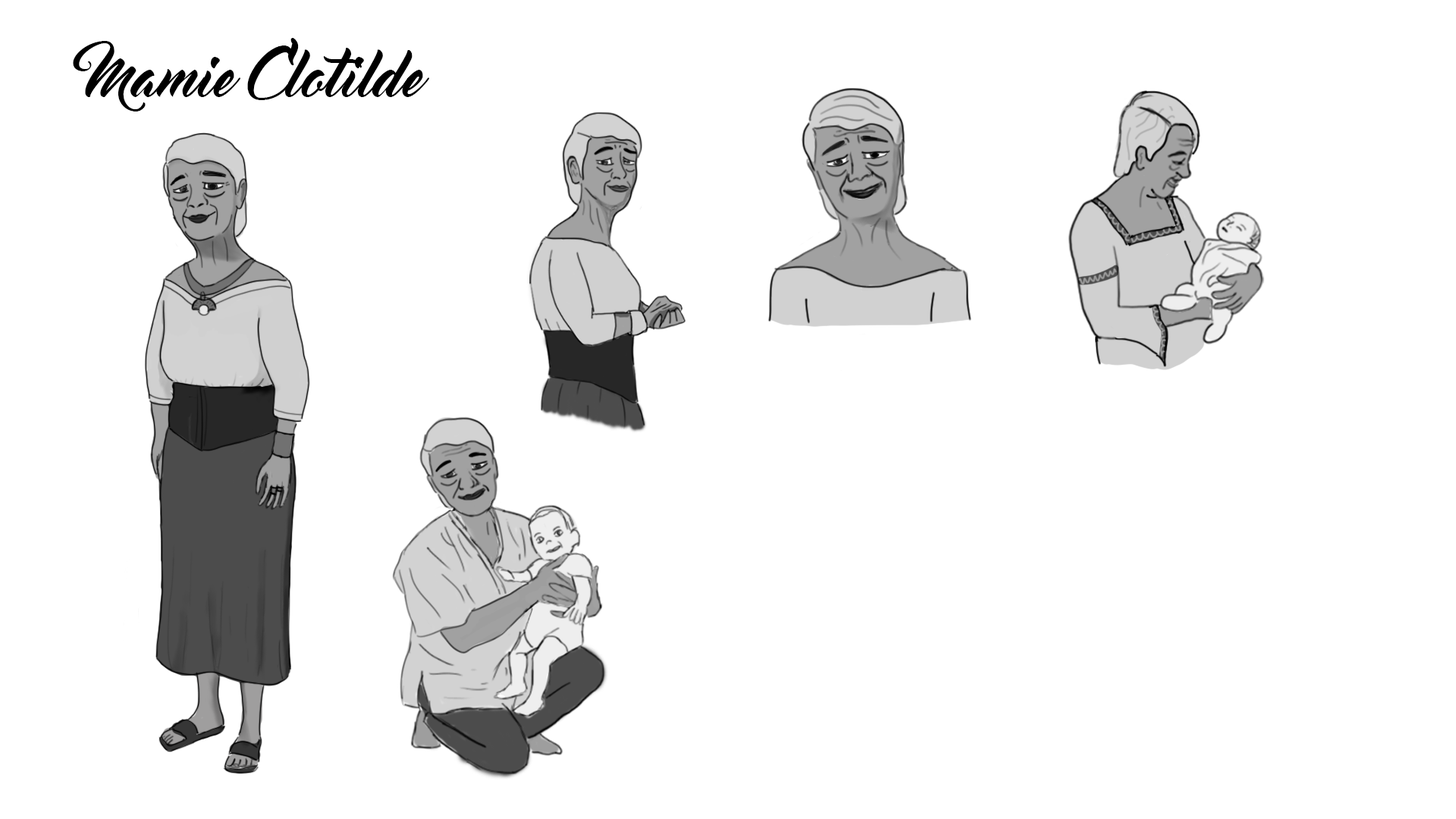
<style>
.page{position:relative;width:1456px;height:819px;background:#ffffff}
.page>*{position:absolute;margin:0}
.t1{font:54.7px "MasterOfBreak";color:#000000}
</style>
<div class="page">
<p class="t1" style="left:73px;top:38px;width:356px;height:73px">Mamie Clotilde</p>
</div>
